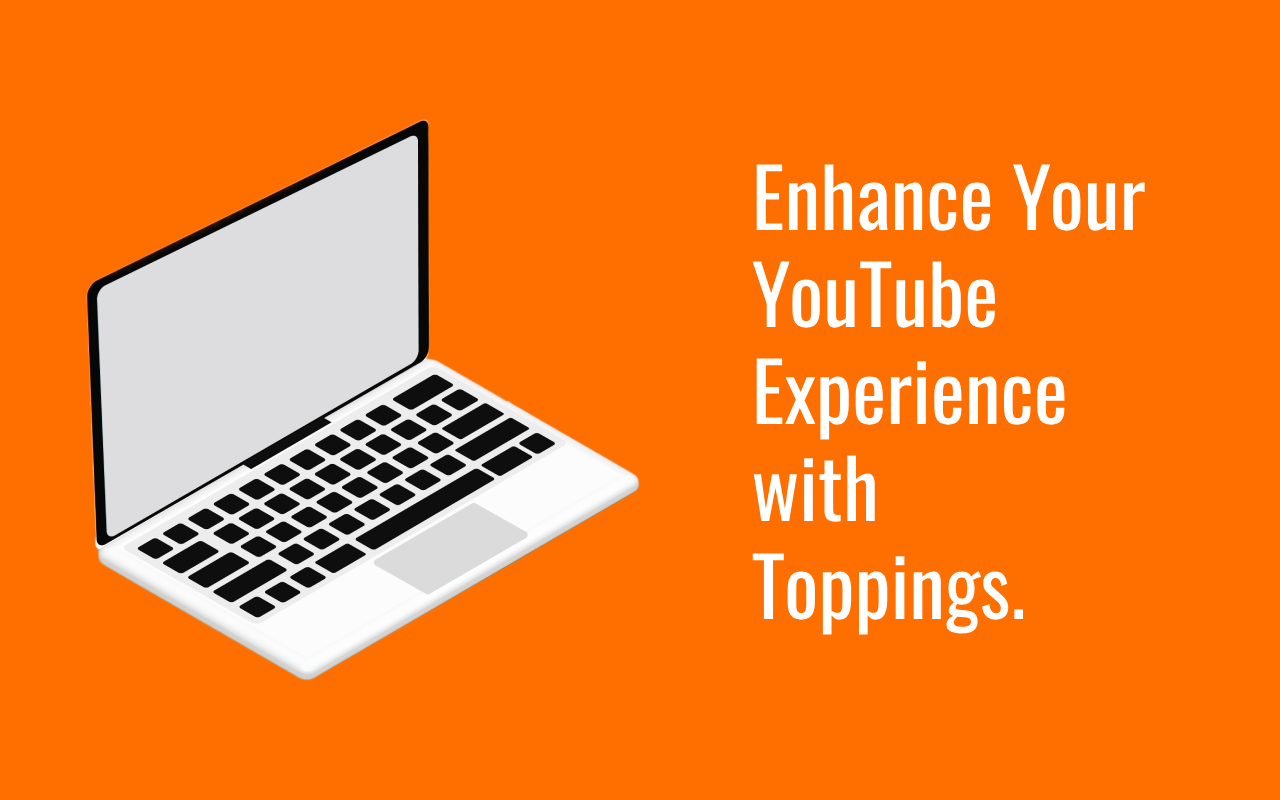
<style>
.page{position:relative;width:1280px;height:800px;background:#ff6f00}
.page>*{position:absolute;margin:0}
.t1{font:81px "Oswald-Regular";color:#ffffff}
</style>
<div class="page">
<p class="t1" style="left:752px;top:164px;width:393px;height:471px">Enhance Your<br>YouTube <br>Experience <br>with <br>Toppings.</p>
</div>
